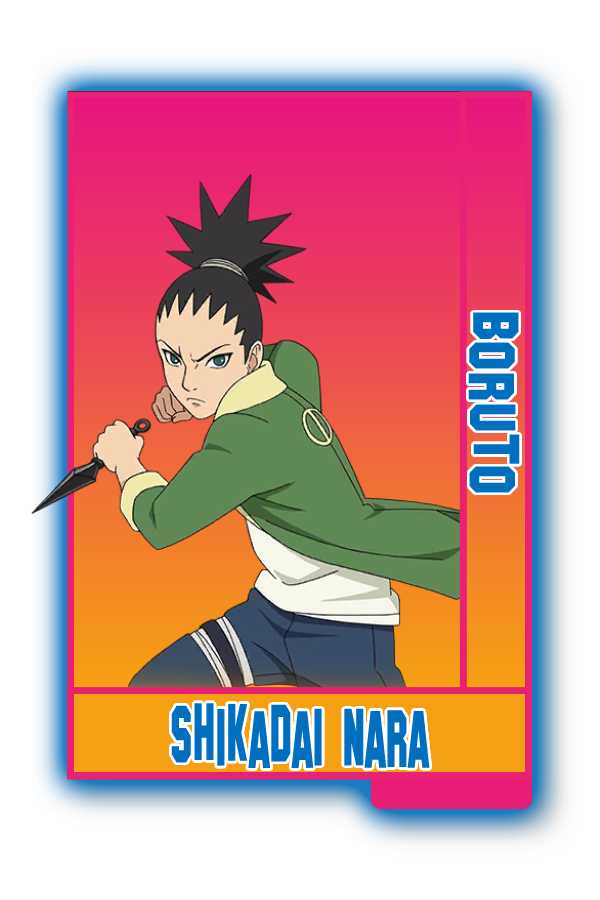
<style>
.page{position:relative;width:600px;height:900px;background:#ffffff}
.page>*{position:absolute;margin:0}
.t1{font:64.7px "SFHollywoodHills";color:#016fbf}
.t2{font:81.1px "SFHollywoodHills";color:#016fbf;scale:0.58 1}
</style>
<div class="page">
<p class="t1" style="left:468px;top:312px;width:52px;height:181px;rotate:90deg">Boruto</p>
<p class="t2" style="left:171px;top:703px;width:259px;height:65px">Shikadai Nara</p>
</div>
